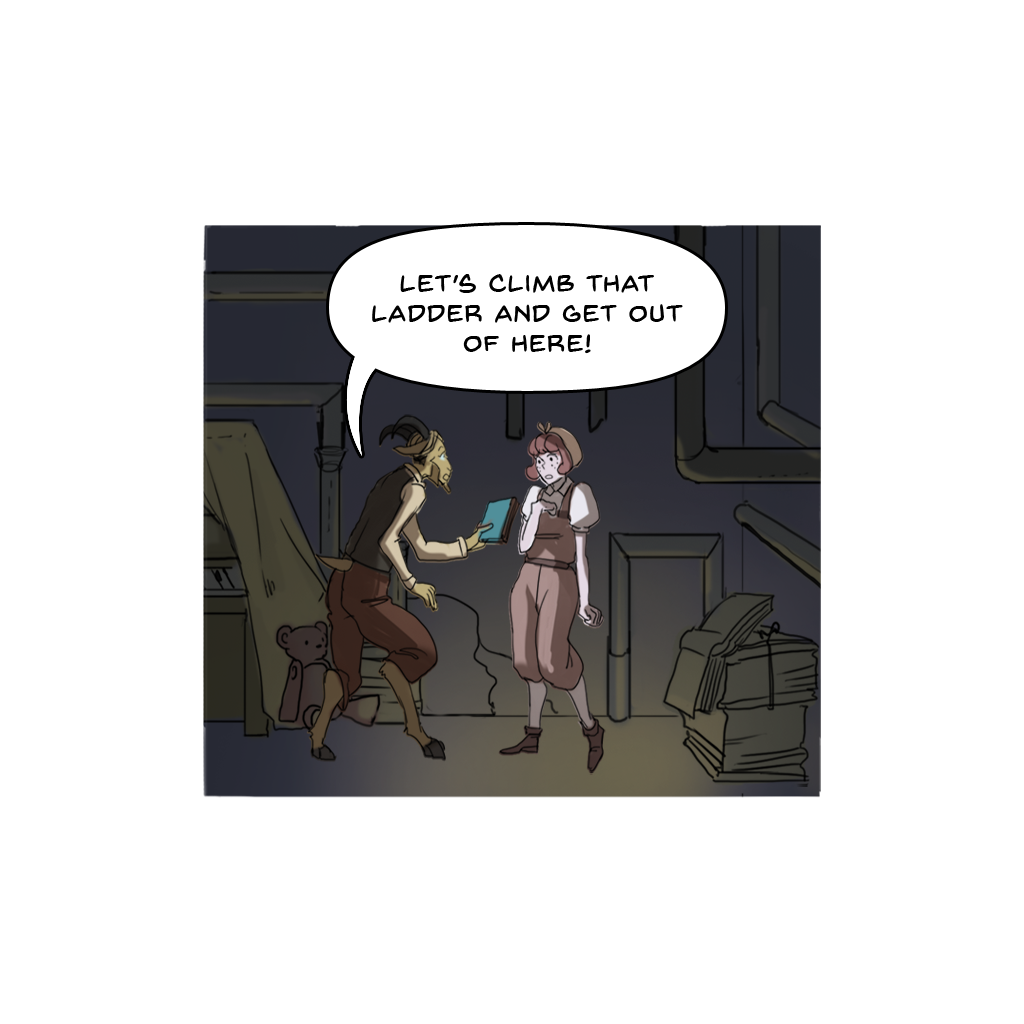
<style>
.page{position:relative;width:1024px;height:1024px;background:#ffffff}
.page>*{position:absolute;margin:0}
.t1{font:25px "BackIssuesBB";letter-spacing:0.05em;color:#000000}
</style>
<div class="page">
<p class="t1" style="left:372px;top:274px;width:311px;height:80px;text-align:center">Let’s climb that ladder and get out of here!</p>
</div>
